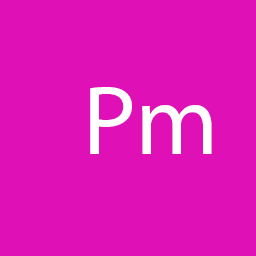
<style>
.page{position:relative;width:256px;height:256px;background:#df10b6}
.page>*{position:absolute;margin:0}
.t1{font:100px "MyriadPro-Regular";color:#ffffff}
</style>
<div class="page">
<p class="t1" style="left:90px;top:87px;width:122px;height:67px">Pm</p>
</div>
